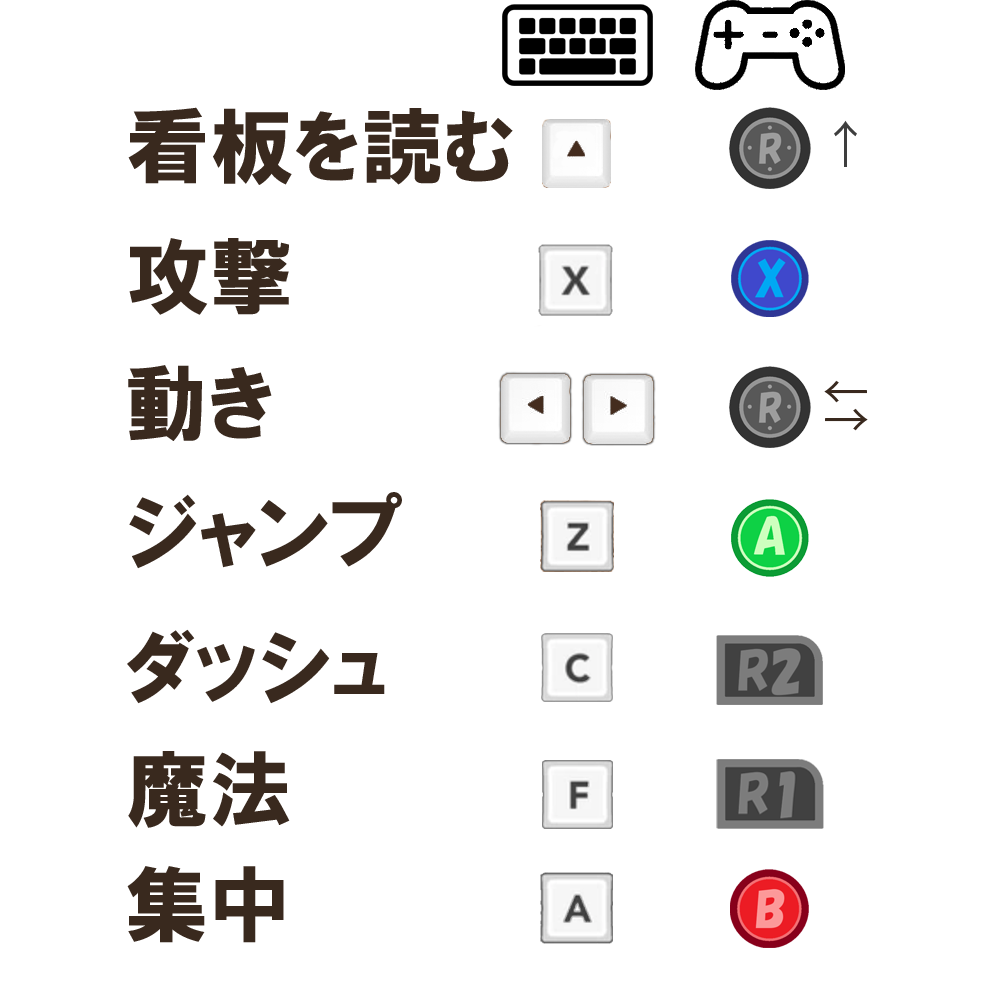
<style>
.page{position:relative;width:1000px;height:1000px;background:#ffffff}
.page>*{position:absolute;margin:0}
.t1{font:83.3px "HGPSoeiKakugothicUB";color:#39291e}
.t2{font:50.1px "KozGoPr6N-Regular";color:#3e3e3e}
.t3{font:45.8px "KozGoPr6N-Regular";color:#39291e}
</style>
<div class="page">
<p class="t1" style="left:128px;top:107px;width:385px;height:78px">看板を読む</p>
<p class="t2" style="left:834px;top:120px;width:23px;height:47px">↑</p>
<p class="t1" style="left:129px;top:238px;width:160px;height:77px">攻撃</p>
<p class="t1" style="left:128px;top:365px;width:144px;height:76px">動き</p>
<p class="t3" style="left:824px;top:380px;width:43px;height:23px">←</p>
<p class="t3" style="left:825px;top:408px;width:43px;height:23px">→</p>
<p class="t1" style="left:129px;top:492px;width:273px;height:77px">ジャンプ</p>
<p class="t1" style="left:127px;top:629px;width:258px;height:75px">ダッシュ</p>
<p class="t1" style="left:128px;top:751px;width:162px;height:77px">魔法</p>
<p class="t1" style="left:127px;top:866px;width:157px;height:77px">集中</p>
</div>
